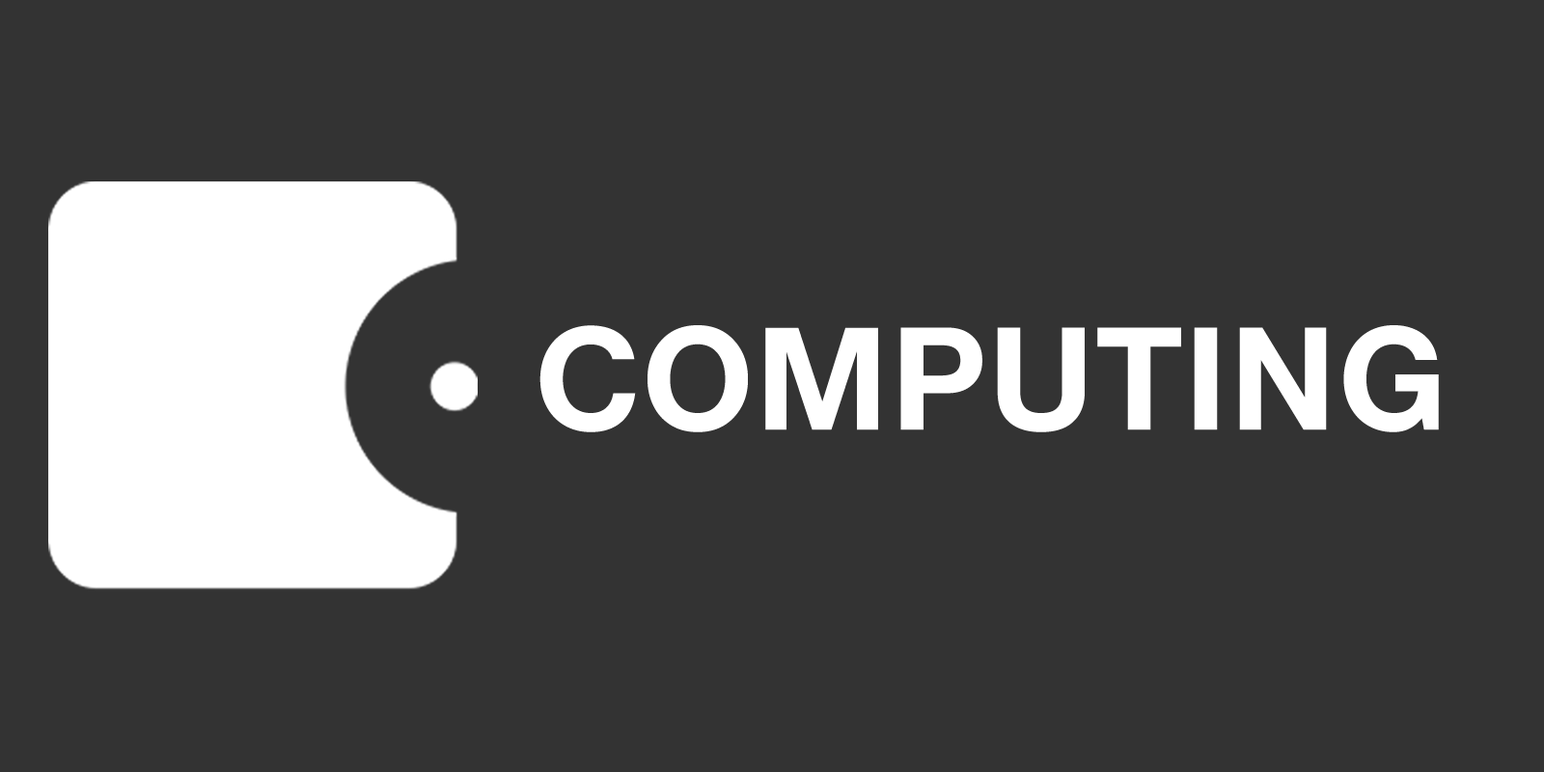
<style>
.page{position:relative;width:1544px;height:772px;background:#333333}
.page>*{position:absolute;margin:0}
.t1{font:142.6px "HelveticaNeueeTextPro-Bold";color:#ffffff}
</style>
<div class="page">
<p class="t1" style="left:540px;top:325px;width:899px;height:107px">COMPUTING</p>
</div>
